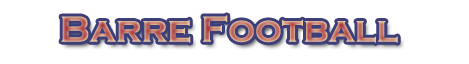
<style>
.page{position:relative;width:469px;height:64px;background:#ffffff}
.page>*{position:absolute;margin:0}
.t1{font:37.5px "CopperplateGothic-Bold"}
</style>
<div class="page">
<p class="t1" style="left:61px;top:15px;width:337px;height:28px">Barre Football</p>
</div>
